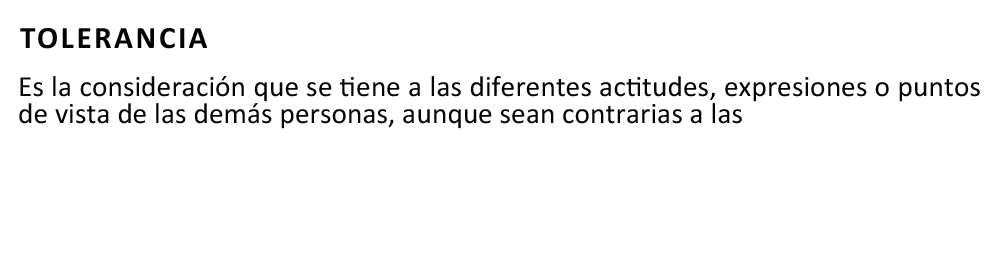
<style>
.page{position:relative;width:1000px;height:261px;background:#ffffff}
.page>*{position:absolute;margin:0}
.t1{font:31.2px "Calibri-Bold";letter-spacing:0.08em;color:#040404}
.t2{font:29.2px/27.1px "Calibri";letter-spacing:0.005em;color:#040404}
</style>
<div class="page">
<p class="t1" style="left:20px;top:28px;width:187px;height:21px">TOLERANCIA</p>
<p class="t2" style="left:19px;top:76px;width:961px;height:53px;text-align:justify">Es la consideración que se tiene a las diferentes actitudes, expresiones o puntos de vista de las demás personas, aunque sean contrarias a las <br><br><br><br>....</p>
</div>
